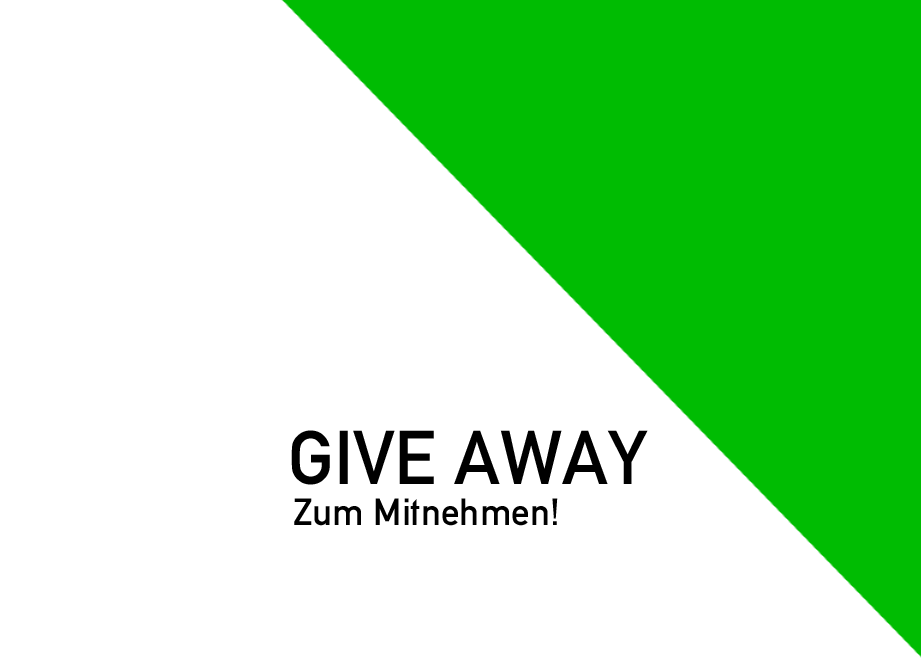
<style>
.page{position:relative;width:921px;height:661px;background:#ffffff}
.page>*{position:absolute;margin:0}
.t1{font:74.7px "AlteDIN1451Mittelschrift";color:#000000}
.t2{font:37.4px "AlteDIN1451Mittelschrift";color:#000000}
</style>
<div class="page">
<p class="t1" style="left:291px;top:430px;width:357px;height:55px">GIVE AWAY</p>
<p class="t2" style="left:294px;top:498px;width:264px;height:28px">Zum Mitnehmen!</p>
</div>
